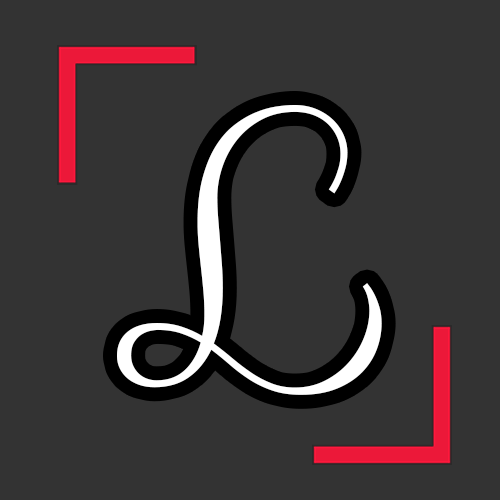
<style>
.page{position:relative;width:500px;height:500px;background:#333333}
.page>*{position:absolute;margin:0}
.t1{font:361.1px "ClickerScript-Regular";color:#ffffff}
</style>
<div class="page">
<p class="t1" style="left:117px;top:105px;width:265px;height:290px">L</p>
</div>
